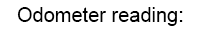
<style>
.page{position:relative;width:200px;height:30px;background:#ffffff}
.page>*{position:absolute;margin:0}
.t1{font:20px "ArialMT";color:#000000}
</style>
<div class="page">
<p class="t1" style="left:17px;top:7px;width:166px;height:19px">Odometer reading:</p>
</div>
